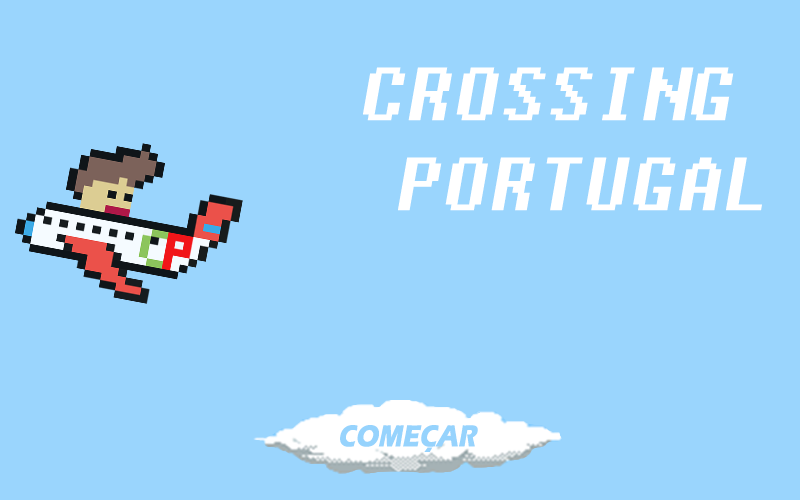
<style>
.page{position:relative;width:800px;height:500px;background:#9ad5fd}
.page>*{position:absolute;margin:0}
.t1{font:75px "Fixedsys";color:#ffffff;font-style:italic}
.t2{font:31.2px "ErasITC-Bold";color:#96d3fd;font-style:italic;scale:0.83 1}
</style>
<div class="page">
<p class="t1" style="left:363px;top:67px;width:399px;height:144px">CROSSING <br> PORTUGAL</p>
<p class="t2" style="left:340px;top:425px;width:138px;height:27px">COMEÇAR</p>
</div>
